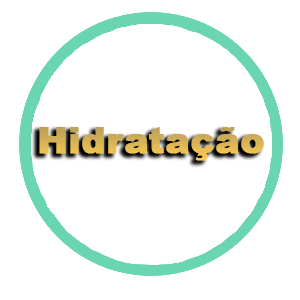
<style>
.page{position:relative;width:300px;height:300px;background:#ffffff}
.page>*{position:absolute;margin:0}
.t1{font:36px "Arial-Black";color:#d7ad43;font-weight:bold}
</style>
<div class="page">
<p class="t1" style="left:39px;top:127px;width:225px;height:34px">Hidratação</p>
</div>
